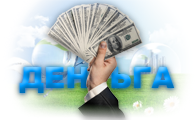
<style>
.page{position:relative;width:195px;height:120px}
.page>*{position:absolute;margin:0}
.t1{font:29.4px "Arial-Black"}
</style>
<div class="page">
<p class="t1" style="left:19px;top:67px;width:156px;height:26px">ДЕН  ЬГА</p>
</div>
